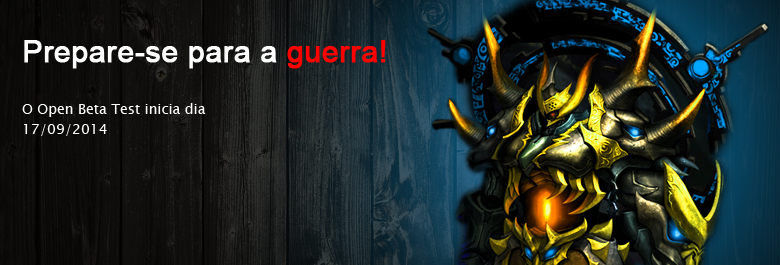
<style>
.page{position:relative;width:780px;height:265px}
.page>*{position:absolute;margin:0}
.t1{font:30px "ArialMT";color:#ffffff;font-weight:bold}
.t2{font:30px "ArialMT";color:#ff0000;font-weight:bold}
.t3{font:14px/20px "LucidaSansUnicode";color:#ffffff}
</style>
<div class="page">
<p class="t1" style="left:24px;top:40px;width:362px;height:29px">Prepare-se para a <span class="t2">guerra!</span></p>
<p class="t3" style="left:22px;top:103px;width:184px;height:33px">O Open Beta Test inicia dia<br>17/09/2014</p>
</div>
